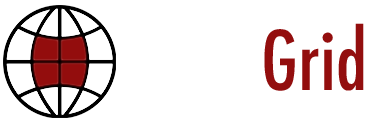
<style>
.page{position:relative;width:371px;height:125px;background:#ffffff}
.page>*{position:absolute;margin:0}
.t1{font:79.6px "Futura-CondensedMedium";color:#ffffff}
.t2{font:79.6px "Futura-CondensedMedium";color:#930e0e}
</style>
<div class="page">
<p class="t1" style="left:135px;top:23px;width:229px;height:68px">News<span class="t2">Grid</span></p>
</div>
